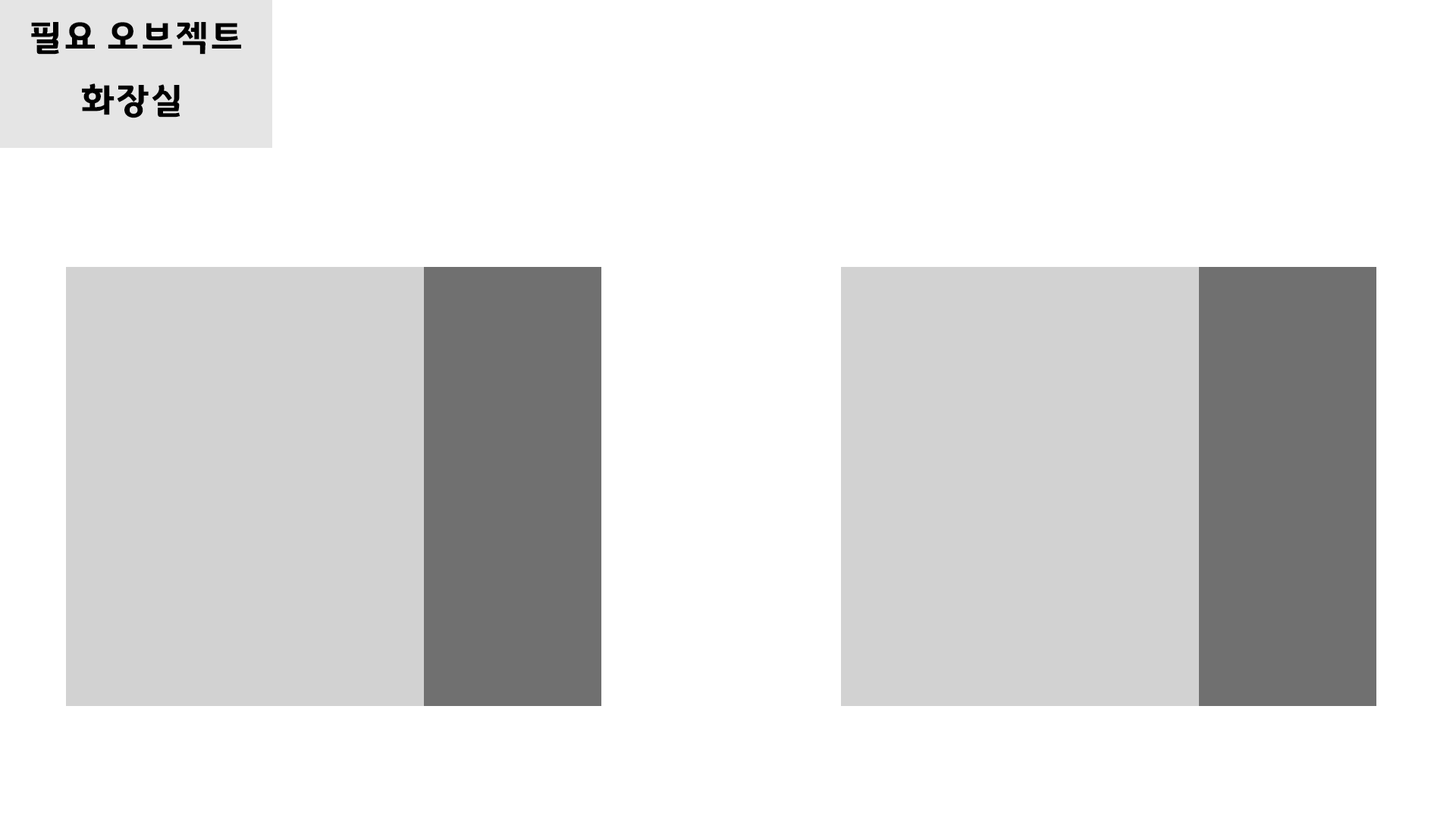
<style>
.page{position:relative;width:1456px;height:819px;background:#ffffff}
.page>*{position:absolute;margin:0}
.t1{font:36.4px "GyeonggiTitleV";letter-spacing:-0.05em;color:#000000}
</style>
<div class="page">
<p class="t1" style="left:31px;top:22px;width:210px;height:33px">필요 오브젝트</p>
<p class="t1" style="left:82px;top:83px;width:98px;height:35px">화장실</p>
</div>
